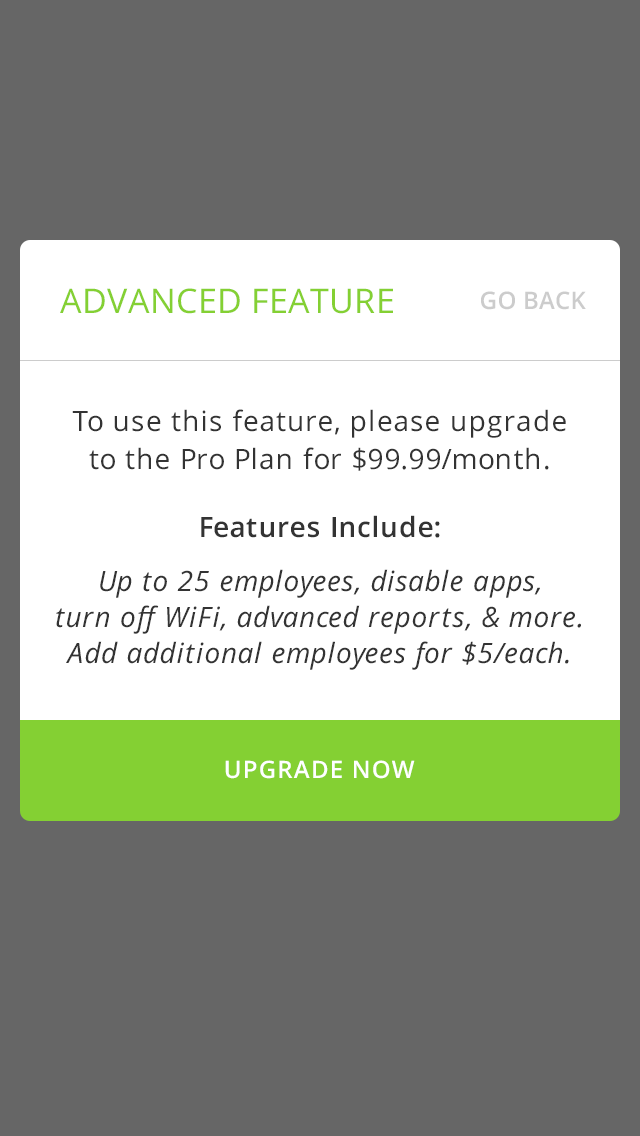
<style>
.page{position:relative;width:640px;height:1136px;background:#666666}
.page>*{position:absolute;margin:0}
.t1{font:34px "OpenSans";letter-spacing:0.01em;color:#84d033;text-transform:uppercase}
.t2{font:24px "OpenSans-Semibold";letter-spacing:0.01em;color:#cccccc}
.t3{font:28px/36px "OpenSans-Italic";letter-spacing:0.025em;color:#333333}
.t4{font:28px/38px "OpenSans";letter-spacing:0.025em;color:#333333}
.t5{font:28px/30px "OpenSans-Semibold";letter-spacing:0.025em;color:#333333}
.t6{font:28px/30px "OpenSans-Italic";letter-spacing:0.025em;color:#333333}
.t7{font:24px "OpenSans-Semibold";letter-spacing:0.05em;color:#ffffff;text-transform:uppercase}
</style>
<div class="page">
<p class="t1" style="left:60px;top:288px;width:333px;height:26px">ADVANCED FEATURE</p>
<p class="t2" style="left:481px;top:291px;width:105px;height:19px">GO BACK</p>
<p class="t3" style="left:56px;top:409px;width:525px;height:261px;text-align:center"><span class="t4">To use this feature, please upgrade <br>to the Pro Plan for $99.99/month.<br><br></span><span class="t5">Features Include:<br><br></span><span class="t6">Up to 25 employees, disable apps, <br></span>turn off WiFi, advanced reports, &amp; more. Add additional employees for $5/each.</p>
<p class="t7" style="left:225px;top:760px;width:190px;height:19px">UPGRADE NOW</p>
</div>
